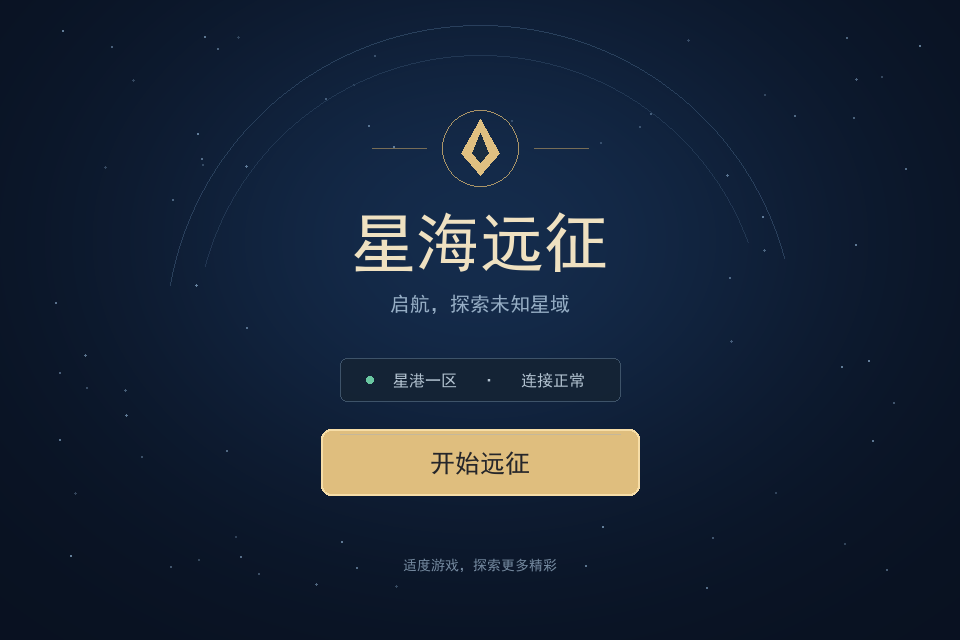
<style>
.page{position:relative;width:960px;height:640px}
.page>*{position:absolute;margin:0}
.t1{font:64px "SimHei";color:#efe1c1}
.t2{font:20px "SimHei";color:#96aec5}
.t3{font:16px "SimHei";color:#b2c2d0}
.t4{font:25px "SimHei";color:#25262a}
.t5{font:14px "SimHei";color:#74899f}
</style>
<div class="page">
<p class="t1" style="left:354px;top:212px;width:252px;height:60px">星海远征</p>
<p class="t2" style="left:390px;top:294px;width:180px;height:20px">启航，探索未知星域</p>
<p class="t3" style="left:393px;top:372px;width:191px;height:16px">星港一区   ·   连接正常</p>
<p class="t4" style="left:431px;top:451px;width:98px;height:24px">开始远征</p>
<p class="t5" style="left:403px;top:558px;width:154px;height:15px">适度游戏，探索更多精彩</p>
</div>
